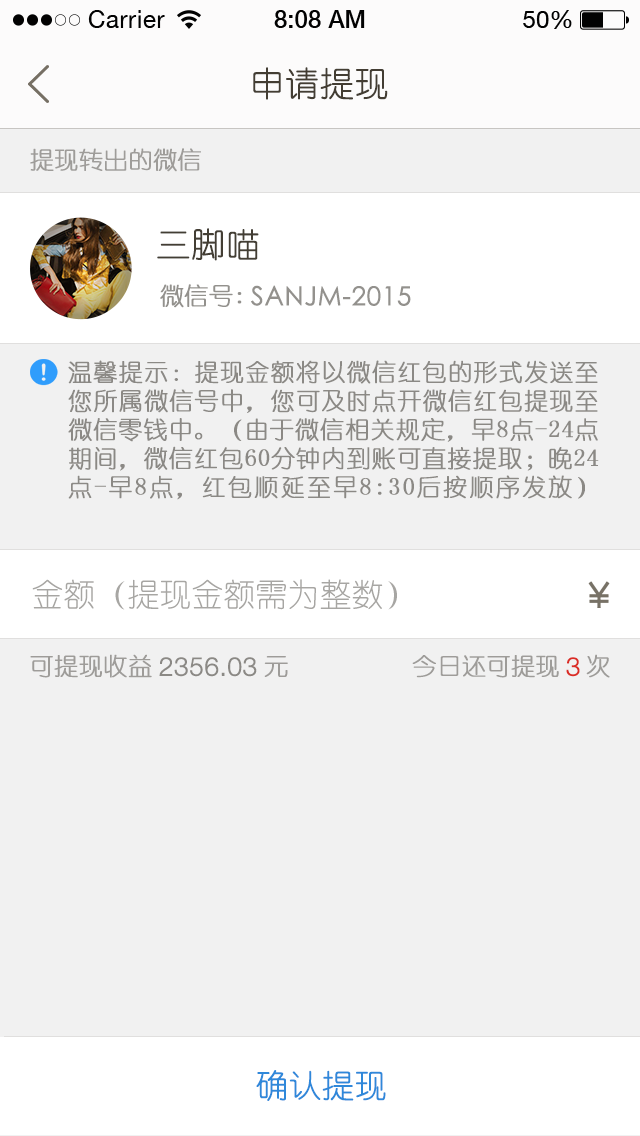
<style>
.page{position:relative;width:640px;height:1136px;background:#f1f1f1}
.page>*{position:absolute;margin:0}
.t1{font:34px "YouYuan";color:#433d33;text-transform:uppercase;font-weight:bold}
.t2{font:24px "YouYuan";color:#9e9c99;text-transform:uppercase;font-weight:bold}
.t3{font:34px "YouYuan";color:#433e34;text-transform:uppercase;font-weight:bold}
.t4{font:24px "YouYuan";color:#93918d;text-transform:uppercase;font-weight:bold}
.t5{font:26px "STHeitiSC-Light";color:#93918d;text-transform:uppercase;font-weight:bold}
.t6{font:24px "YouYuan";color:#8b8985;text-transform:uppercase;font-weight:bold}
.t7{font:32px "YouYuan";color:#a7a6a3;text-transform:uppercase}
.t8{font:26px "HelveticaNeueLTPro-Lt";color:#8b8985;text-transform:uppercase;font-weight:bold}
.t9{font:26px "HelveticaNeueLTPro-Lt";color:#db2c25;text-transform:uppercase;font-weight:bold}
.t10{font:32px "YouYuan";color:#2f88da;text-transform:uppercase;font-weight:bold}
</style>
<div class="page">
<p class="t1" style="left:253px;top:67px;width:135px;height:33px">申请提现</p>
<p class="t2" style="left:30px;top:148px;width:171px;height:24px">提现转出的微信</p>
<p class="t3" style="left:157px;top:228px;width:102px;height:33px">三脚喵</p>
<p class="t4" style="left:160px;top:284px;width:82px;height:24px">微信号:</p>
<p class="t5" style="left:251px;top:285px;width:160px;height:21px">sanjm-2015</p>
<p class="t6" style="left:68px;top:360px;width:531px;height:140px;text-align:justify">温馨提示：提现金额将以微信红包的形式发送至您所属微信号中，您可及时点开微信红包提现至微信零钱中。（由于微信相关规定，早8点-24点期间，微信红包60分钟内到账可直接提取；晚24点-早8点，红包顺延至早8:30后按顺序发放）</p>
<p class="t7" style="left:32px;top:579px;width:365px;height:31px">金额（提现金额需为整数）</p>
<p class="t2" style="left:30px;top:654px;width:122px;height:24px">可提现收益</p>
<p class="t2" style="left:586px;top:654px;width:24px;height:24px">次</p>
<p class="t8" style="left:159px;top:657px;width:98px;height:20px">2356.03</p>
<p class="t2" style="left:264px;top:656px;width:24px;height:21px">元</p>
<p class="t2" style="left:412px;top:655px;width:147px;height:23px">今日还可提现</p>
<p class="t9" style="left:566px;top:657px;width:14px;height:20px">3</p>
<p class="t10" style="left:256px;top:1070px;width:130px;height:31px">确认提现</p>
</div>
